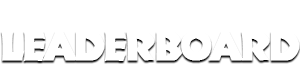
<style>
.page{position:relative;width:300px;height:80px;background:#ffffff}
.page>*{position:absolute;margin:0}
.t1{font:41.5px "Informal011BT-Roman";letter-spacing:-0.06em;color:#ffffff;font-weight:bold}
</style>
<div class="page">
<p class="t1" style="left:1px;top:31px;width:299px;height:30px">leaderboard</p>
</div>
